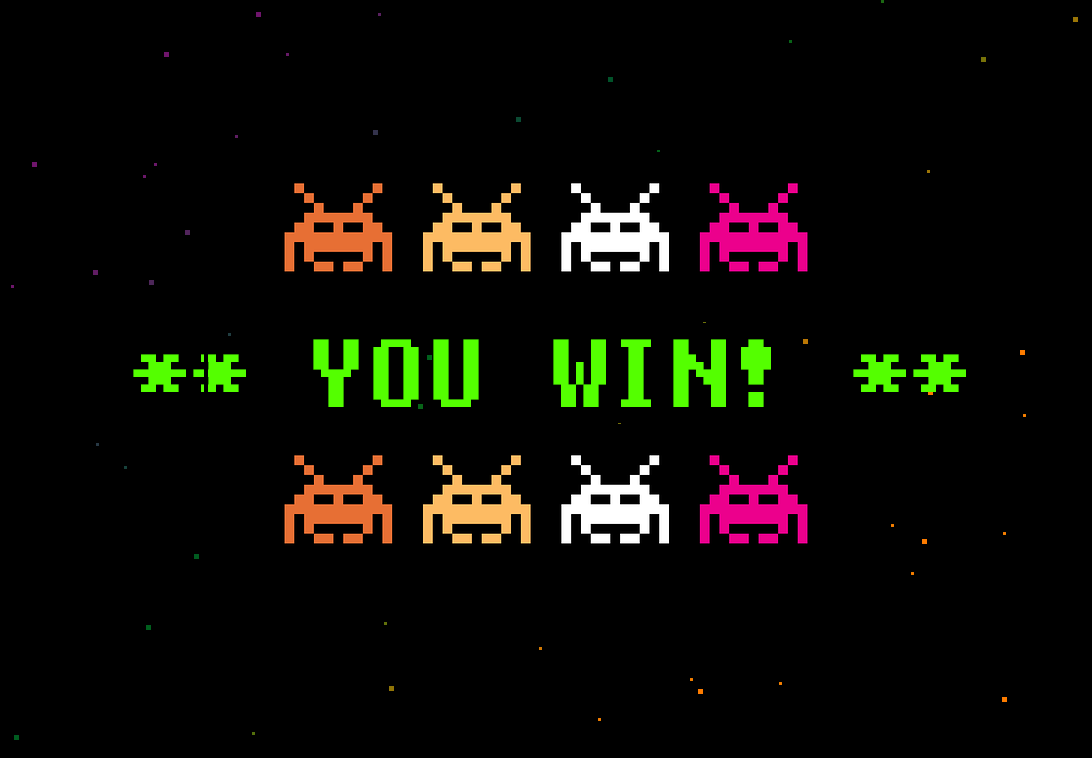
<style>
.page{position:relative;width:1092px;height:758px;background:#000000}
.page>*{position:absolute;margin:0}
.t1{font:96px "Fixedsys";color:#54ff00}
</style>
<div class="page">
<p class="t1" style="left:133px;top:339px;width:833px;height:68px">** YOU WIN! **</p>
</div>
